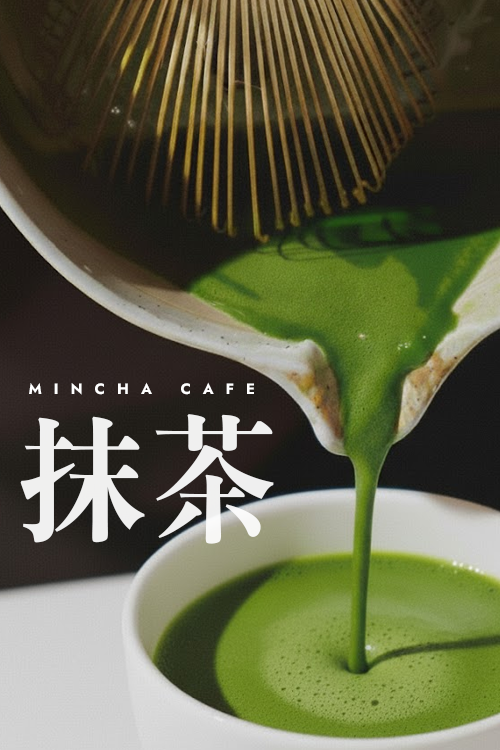
<style>
.page{position:relative;width:500px;height:750px}
.page>*{position:absolute;margin:0}
.t1{font:15px "Jost-Bold";letter-spacing:0.8em;color:#ffffff}
.t2{font:143.3px "H2mjrE";color:#ffffff;scale:0.92 1}
</style>
<div class="page">
<p class="t1" style="left:29px;top:382px;width:225px;height:13px">MINCHA CAFE</p>
<p class="t2" style="left:20px;top:414px;width:254px;height:130px;opacity:0.9">抹茶</p>
</div>
